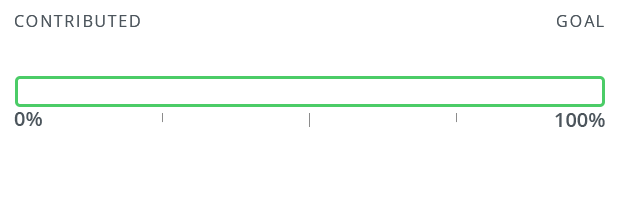
<style>
.page{position:relative;width:620px;height:200px;background:#ffffff}
.page>*{position:absolute;margin:0}
.t1{font:16px "OpenSans";letter-spacing:0.1em;color:#4c555c}
.t2{font:20px "OpenSans-Semibold";color:#4c555c}
</style>
<div class="page">
<p class="t1" style="left:15px;top:15px;width:125px;height:12px">CONTRIBUTED</p>
<p class="t1" style="left:557px;top:15px;width:47px;height:12px">GOAL</p>
<p class="t2" style="left:14px;top:112px;width:28px;height:14px">0%</p>
<p class="t2" style="left:555px;top:113px;width:50px;height:14px">100%</p>
</div>
